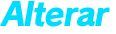
<style>
.page{position:relative;width:116px;height:34px;background:#ffffff}
.page>*{position:absolute;margin:0}
.t1{font:32px "RodinPro-EB";letter-spacing:-0.046em;color:#00dcfe;font-style:italic}
</style>
<div class="page">
<p class="t1" style="left:0px;top:1px;width:110px;height:26px">Alterar</p>
</div>
